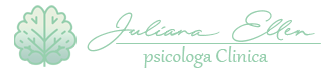
<style>
.page{position:relative;width:330px;height:76px;background:#ffffff}
.page>*{position:absolute;margin:0}
.t1{font:77.8px "QuickSignaturePersonalUse";color:#97cfae;scale:0.97 1}
.t2{font:24.1px "Gabriola";color:#97cfae}
</style>
<div class="page">
<p class="t1" style="left:87px;top:10px;width:228px;height:42px">Juliana Ellen</p>
<p class="t2" style="left:143px;top:46px;width:125px;height:22px">psicologa Clinica</p>
</div>
